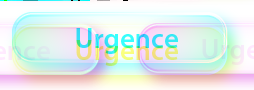
<style>
.page{position:relative;width:254px;height:90px}
.page>*{position:absolute;margin:0}
.t1{font:29.2px "MyriadPro-Semibold"}
</style>
<div class="page">
<p class="t1" style="left:76px;top:28px;width:102px;height:26px">Urgence</p>
</div>
